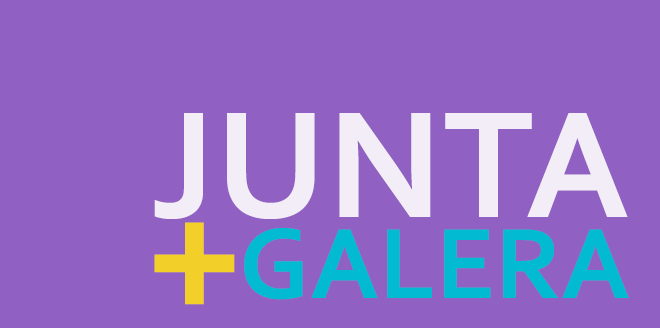
<style>
.page{position:relative;width:660px;height:328px;background:#9061c2}
.page>*{position:absolute;margin:0}
.t1{font:159.3px "Corbel-Bold";color:#f2edf6}
.t2{font:191.1px "Corbel-Bold";color:#f2cf29}
.t3{font:105px "Corbel-Bold";color:#02bbd3}
</style>
<div class="page">
<p class="t1" style="left:154px;top:113px;width:474px;height:106px">JUNTA</p>
<p class="t2" style="left:154px;top:222px;width:81px;height:83px">+</p>
<p class="t3" style="left:244px;top:228px;width:385px;height:72px">GALERA</p>
</div>
